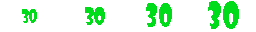
<style>
.page{position:relative;width:256px;height:32px;background:#ffffff}
.page>*{position:absolute;margin:0}
.t1{font:30px "ShowcardGothic-Reg";color:#00dc1a;scale:0.85 1}
.t2{font:36px "ShowcardGothic-Reg";color:#00dc1a;scale:0.85 1}
.t3{font:18px "ShowcardGothic-Reg";color:#00dc1a;scale:0.85 1}
.t4{font:24px "ShowcardGothic-Reg";color:#00dc1a;scale:0.85 1}
</style>
<div class="page">
<p class="t1" style="left:146px;top:3px;width:26px;height:24px">30</p>
<p class="t2" style="left:208px;top:1px;width:31px;height:28px">30</p>
<p class="t3" style="left:22px;top:9px;width:15px;height:14px">30</p>
<p class="t4" style="left:85px;top:7px;width:20px;height:18px">30</p>
</div>
